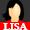
<style>
.page{position:relative;width:30px;height:30px;background:#333333}
.page>*{position:absolute;margin:0}
.t1{font:10px "CalisMTBol";color:#ffffff}
</style>
<div class="page">
<p class="t1" style="left:3px;top:23px;width:25px;height:7px">LISA</p>
</div>
